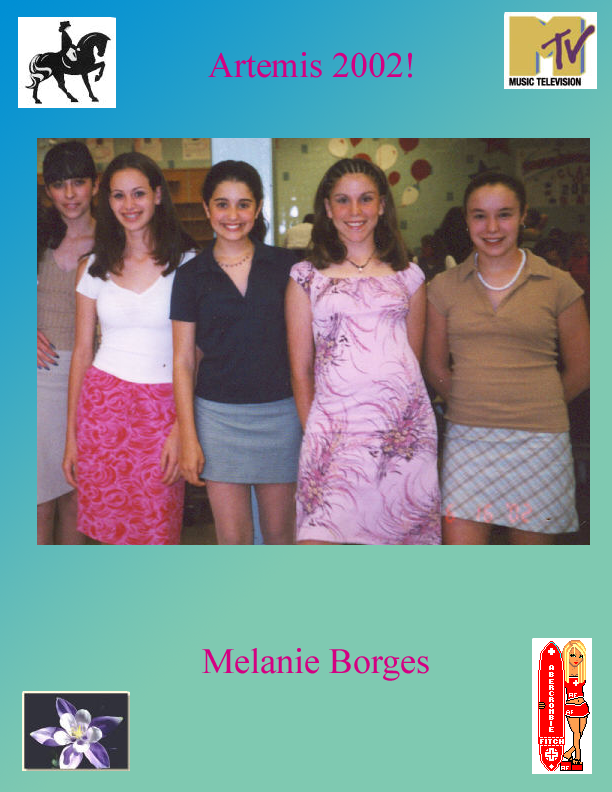
<style>
.page{position:relative;width:612px;height:792px;background:#7fc9b1}
.page>*{position:absolute;margin:0}
.t1{font:36px "TimesNewRomanPSMT";color:#d40082}
</style>
<div class="page">
<p class="t1" style="left:208px;top:52px;width:204px;height:26px">Artemis 2002!</p>
<p class="t1" style="left:202px;top:648px;width:227px;height:33px">Melanie Borges</p>
</div>
